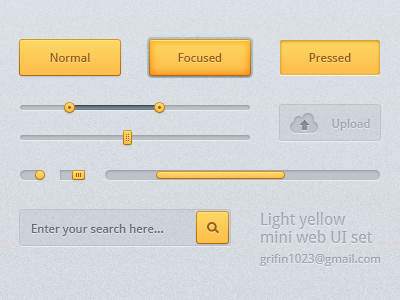
<style>
.page{position:relative;width:400px;height:300px}
.page>*{position:absolute;margin:0}
.t1{font:12px "DroidSans";color:#975c25}
.t2{font:12px "DroidSans";color:#a1a7ae}
.t3{font:16px/18px "DroidSans";color:#a2a8af}
.t4{font:12px/20px "DroidSans";color:#a2a8af}
.t5{font:12px "DroidSans";color:#6a6f73}
</style>
<div class="page">
<p class="t1" style="left:50px;top:53px;width:40px;height:9px">Normal</p>
<p class="t1" style="left:178px;top:53px;width:44px;height:9px">Focused</p>
<p class="t1" style="left:309px;top:53px;width:42px;height:9px">Pressed</p>
<p class="t2" style="left:332px;top:119px;width:38px;height:12px">Upload</p>
<p class="t3" style="left:260px;top:212px;width:121px;height:54px">Light yellow<br>mini web UI set<br><span class="t4">grifin1023@gmail.com</span></p>
<p class="t5" style="left:32px;top:224px;width:131px;height:12px">Enter your search here...</p>
</div>
